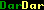
<style>
.page{position:relative;width:44px;height:10px;background:#000000}
.page>*{position:absolute;margin:0}
.t1{font:13.2px "Onesize";color:#009900;scale:0.91 1}
.t2{font:13.2px "Onesize";color:#ffff66;scale:0.91 1}
</style>
<div class="page">
<p class="t1" style="left:0px;top:1px;width:22px;height:8px">Dar</p>
<p class="t2" style="left:22px;top:1px;width:22px;height:8px">Dar</p>
</div>
